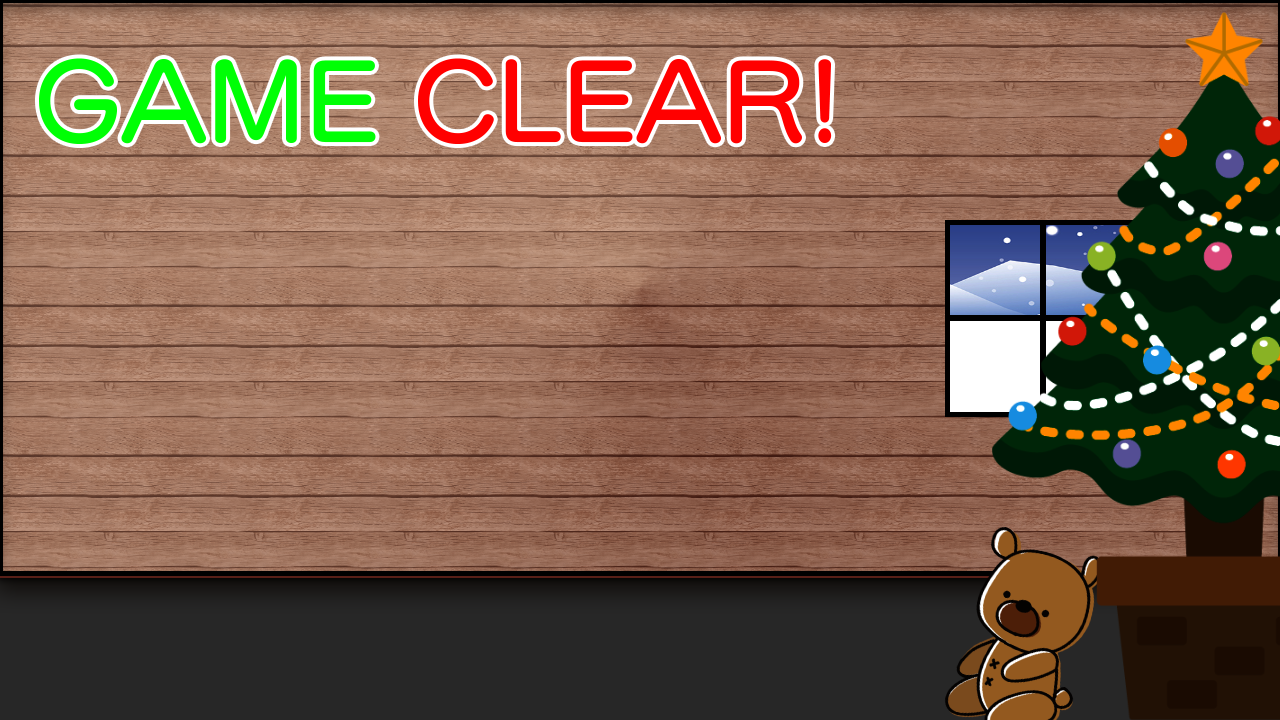
<style>
.page{position:relative;width:1280px;height:720px}
.page>*{position:absolute;margin:0}
.t1{font:104.2px "SeuratProN-DB";color:#ff0000}
.t2{font:104.2px "SeuratProN-DB";color:#00ff06}
</style>
<div class="page">
<p class="t1" style="left:39px;top:58px;width:793px;height:86px"><span class="t2">GAME </span>CLEAR!</p>
</div>
